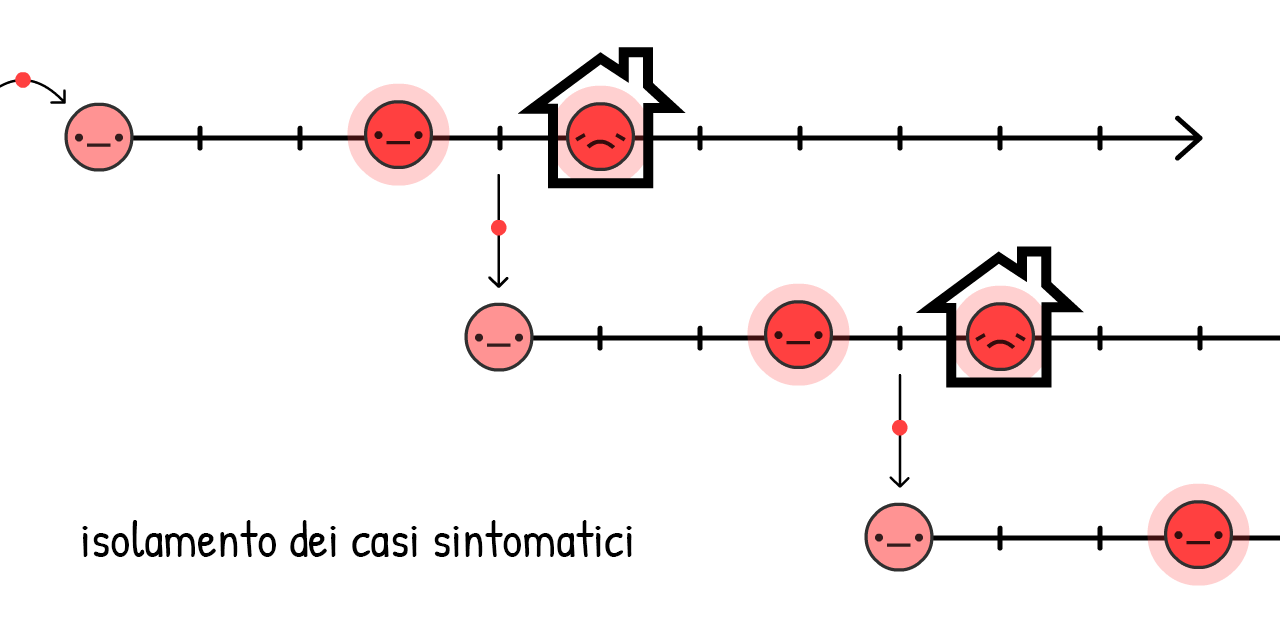
<style>
.page{position:relative;width:1280px;height:640px;background:#ffffff}
.page>*{position:absolute;margin:0}
.t1{font:50px "PatrickHand-Regular";color:#000000}
</style>
<div class="page">
<p class="t1" style="left:82px;top:520px;width:550px;height:37px">isolamento dei casi sintomatici</p>
</div>
